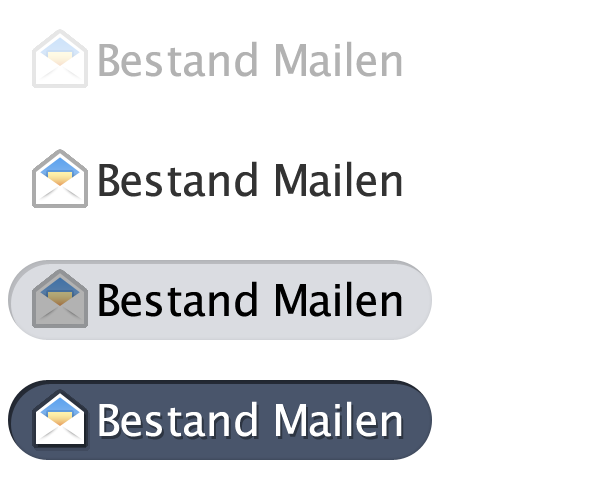
<style>
.page{position:relative;width:600px;height:480px;background:#ffffff}
.page>*{position:absolute;margin:0}
.t1{font:44px "LucidaGrande";letter-spacing:-0.01em;color:#b2b2b2}
.t2{font:44px "LucidaGrande";letter-spacing:-0.01em;color:#333333}
.t3{font:44px "LucidaGrande";letter-spacing:-0.01em;color:#000000}
.t4{font:44px "LucidaGrande";letter-spacing:-0.01em;color:#ffffff}
</style>
<div class="page">
<p class="t1" style="left:99px;top:41px;width:303px;height:36px">Bestand Mailen</p>
<p class="t2" style="left:99px;top:161px;width:303px;height:36px">Bestand Mailen</p>
<p class="t3" style="left:99px;top:281px;width:303px;height:36px">Bestand Mailen</p>
<p class="t4" style="left:99px;top:401px;width:303px;height:36px">Bestand Mailen</p>
</div>
